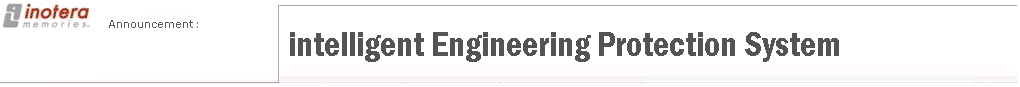
<style>
.page{position:relative;width:1020px;height:87px;background:#ffffff}
.page>*{position:absolute;margin:0}
.t1{font:34.7px "FranklinGothic-DemiCond";color:#525552}
</style>
<div class="page">
<p class="t1" style="left:290px;top:32px;width:549px;height:30px">intelligent Engineering Protection System</p>
</div>
